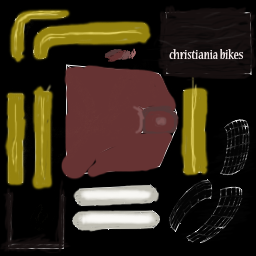
<style>
.page{position:relative;width:256px;height:256px;background:#000000}
.page>*{position:absolute;margin:0}
.t1{font:13.9px "NuevaStd-Cond";color:#f3eaea;scale:1.08 1}
</style>
<div class="page">
<p class="t1" style="left:169px;top:49px;width:74px;height:10px">christiania bikes</p>
</div>
